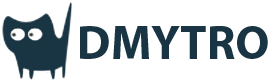
<style>
.page{position:relative;width:273px;height:84px;background:#ffffff}
.page>*{position:absolute;margin:0}
.t1{font:48px "MyriadPro-Bold";color:#193443}
</style>
<div class="page">
<p class="t1" style="left:80px;top:26px;width:188px;height:33px">DMYTRO</p>
</div>
